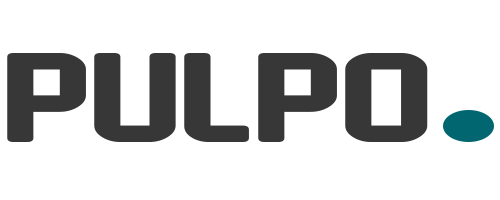
<style>
.page{position:relative;width:500px;height:200px;background:#ffffff}
.page>*{position:absolute;margin:0}
.t1{font:116px "NewAthleticM54";letter-spacing:-0.02em;color:#373737;scale:1.58 1}
</style>
<div class="page">
<p class="t1" style="left:7px;top:53px;width:421px;height:89px">Pulpo</p>
</div>
